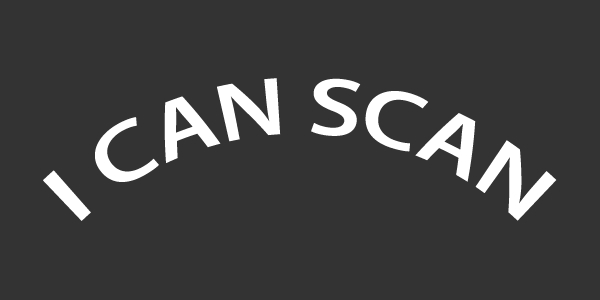
<style>
.page{position:relative;width:600px;height:300px;background:#333333}
.page>*{position:absolute;margin:0}
.t1{font:83.3px "MyriadPro-Semibold";color:#ffffff}
</style>
<div class="page">
<p class="t1" style="left:43px;top:78px;width:514px;height:143px">I CAN SCAN</p>
</div>
